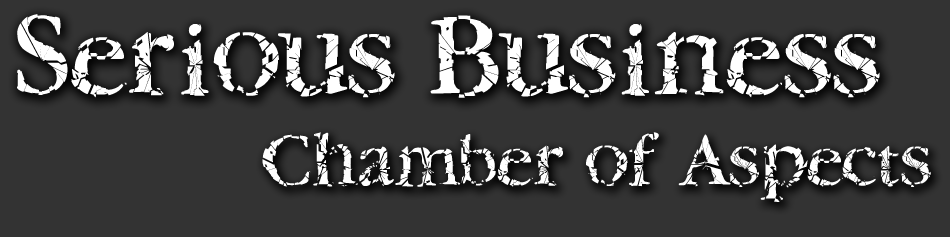
<style>
.page{position:relative;width:950px;height:237px;background:#333333}
.page>*{position:absolute;margin:0}
.t1{font:125px "TwyliteZoneBook";letter-spacing:-0.004em;color:#ffffff}
.t2{font:80px "TwyliteZoneBook";letter-spacing:-0.004em;color:#ffffff}
</style>
<div class="page">
<p class="t1" style="left:17px;top:14px;width:863px;height:84px">Serious Business</p>
<p class="t2" style="left:262px;top:132px;width:669px;height:70px">Chamber of Aspects</p>
</div>
